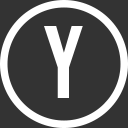
<style>
.page{position:relative;width:128px;height:128px;background:#333333}
.page>*{position:absolute;margin:0}
.t1{font:103.2px "BebasNeuePro-Bold";color:#ffffff}
</style>
<div class="page">
<p class="t1" style="left:44px;top:26px;width:39px;height:72px">Y</p>
</div>
